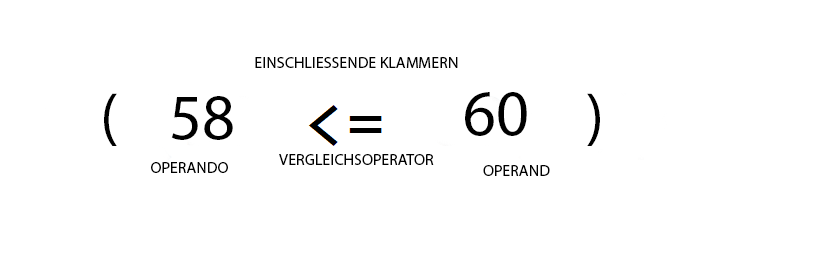
<style>
.page{position:relative;width:813px;height:262px;background:#ffffff}
.page>*{position:absolute;margin:0}
.t1{font:16px "MyriadPro-Regular";color:#000000}
.t2{font:64px "MyriadPro-Regular";color:#000000}
</style>
<div class="page">
<p class="t1" style="left:255px;top:57px;width:203px;height:11px">EINSCHLIESSENDE KLAMMERN</p>
<p class="t2" style="left:104px;top:93px;width:13px;height:53px">(</p>
<p class="t2" style="left:171px;top:96px;width:62px;height:44px">58</p>
<p class="t2" style="left:465px;top:92px;width:62px;height:44px">60</p>
<p class="t2" style="left:587px;top:93px;width:13px;height:53px">)</p>
<p class="t1" style="left:279px;top:154px;width:155px;height:11px">VERGLEICHSOPERATOR</p>
<p class="t1" style="left:151px;top:162px;width:77px;height:11px">OPERANDOPERAND</p>
<p class="t1" style="left:483px;top:165px;width:67px;height:11px">OPERAND</p>
</div>
